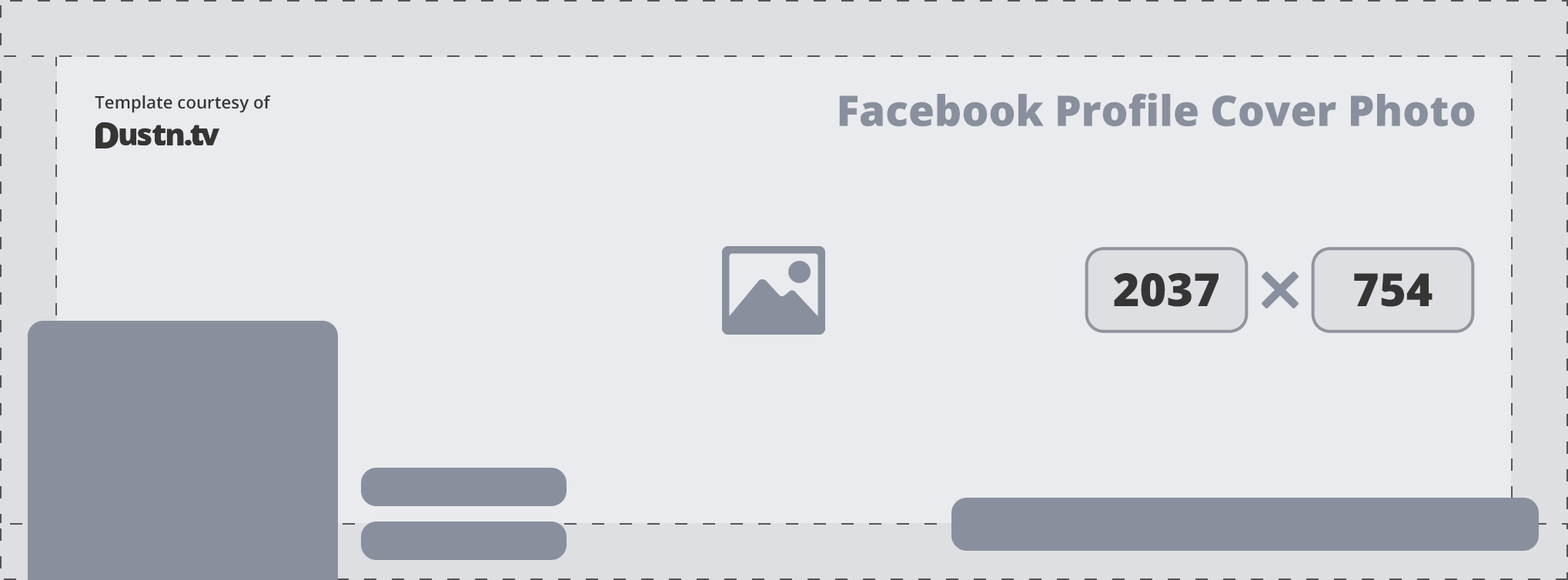
<style>
.page{position:relative;width:1568px;height:580px;background:#e9ebee}
.page>*{position:absolute;margin:0}
.t1{font:17.1px "OpenSans-Semibold";color:#353535}
.t2{font:42.3px "OpenSans-Extrabold";color:#898f9c}
.t3{font:45.8px "OpenSans-Extrabold";color:#353535}
</style>
<div class="page">
<p class="t1" style="left:95px;top:95px;width:176px;height:18px">Template courtesy of</p>
<p class="t2" style="left:839px;top:93px;width:636px;height:34px">Facebook Profile Cover Photo</p>
<p class="t3" style="left:1114px;top:273px;width:105px;height:34px">2037</p>
<p class="t3" style="left:1354px;top:273px;width:79px;height:34px">754</p>
</div>
